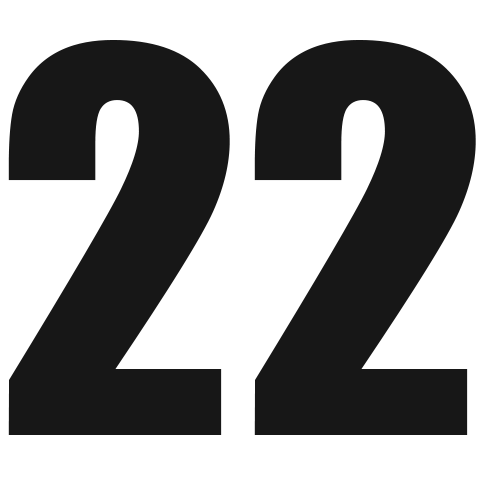
<style>
.page{position:relative;width:480px;height:480px;background:#ffffff}
.page>*{position:absolute;margin:0}
.t1{font:490.3px "Impact";color:#171717}
</style>
<div class="page">
<p class="t1" style="left:8px;top:40px;width:468px;height:395px">22</p>
</div>
